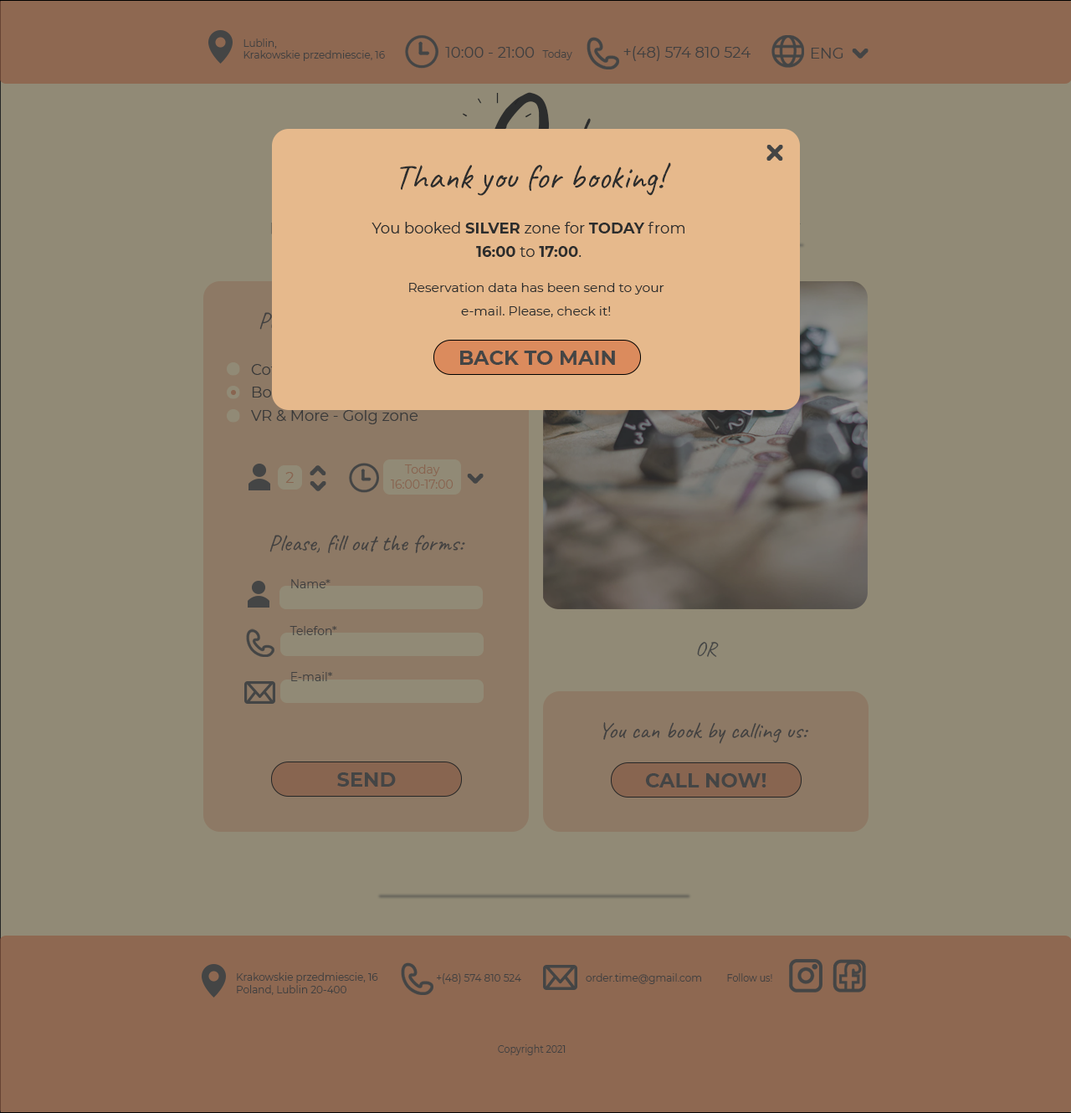
<style>
.page{position:relative;width:1071px;height:1113px;background:#918a76}
.page>*{position:absolute;margin:0}
.t1{font:10px "Montserrat-Regular";color:#3e3b3b}
.t2{font:15.1px "Montserrat-Regular";color:#3e3b3b}
.t3{font:133.9px "Caveat-Regular"}
.t4{font:35.2px "Caveat-Regular";color:#2c2d2d}
.t5{font:15.1px/23.4px "Montserrat-Regular";color:#2c2d2d}
.t6{font:15.1px/23.4px "Montserrat-Bold";color:#2c2d2d;text-transform:uppercase}
.t7{font:15.1px/23.4px "Montserrat-Bold";color:#2c2d2d}
.t8{font:11.7px/23.4px "Montserrat-Regular";color:#2c2d2d;scale:1.11 1}
.t9{font:20.1px "Montserrat-Bold";color:#444545}
.t10{font:15.1px "Montserrat-Regular";color:#2b2b2b}
.t11{font:15.1px "Montserrat-Regular";color:#886550}
.t12{font:11.7px "Montserrat-Regular";color:#886550}
.t13{font:23.4px "Caveat-Regular";color:#3e3b3b}
.t14{font:11.7px "Montserrat-Regular";color:#3e3b3b}
.t15{font:20.1px "Caveat-Regular";color:#444545}
.t16{font:10px "Montserrat-Regular";color:#3e3b3b;scale:0.92 1}
</style>
<div class="page">
<p class="t1" style="left:244px;top:38px;width:141px;height:23px;text-align:justify">Lublin,<br>Krakowskie przedmiescie, 16</p>
<p class="t2" style="left:445px;top:47px;width:127px;height:13px">10:00 - 21:00  <span class="t1">Today</span></p>
<p class="t2" style="left:624px;top:46px;width:127px;height:15px">+(48) 574 810 524</p>
<p class="t2" style="left:811px;top:48px;width:33px;height:11px">ENG</p>
<p class="t3" style="left:485px;top:92px;width:65px;height:95px">O</p>
<p class="t4" style="left:400px;top:162px;width:271px;height:34px">Thank you for booking!</p>
<p class="t5" style="left:372px;top:222px;width:313px;height:35px;text-align:center">You booked <span class="t6">silver</span> zone for <span class="t6">today</span> from <span class="t7">16:00</span> to <span class="t7">17:00</span>.</p>
<p class="t8" style="left:409px;top:283px;width:256px;height:34px;text-align:center">Reservation data has been send to your e-mail. Please, check it!</p>
<p class="t9" style="left:460px;top:351px;width:155px;height:14px">BACK TO MAIN</p>
<p class="t10" style="left:251px;top:409px;width:167px;height:15px">VR &amp; More - Golg zone</p>
<p class="t11" style="left:285px;top:472px;width:9px;height:11px">2</p>
<p class="t12" style="left:404px;top:464px;width:36px;height:12px">Today</p>
<p class="t12" style="left:391px;top:480px;width:63px;height:9px">16:00-17:00</p>
<p class="t13" style="left:269px;top:535px;width:196px;height:18px">Please, fill out the forms:</p>
<p class="t14" style="left:291px;top:579px;width:40px;height:9px">Name*</p>
<p class="t14" style="left:290px;top:626px;width:47px;height:9px">Telefon*</p>
<p class="t15" style="left:697px;top:642px;width:22px;height:15px">OR</p>
<p class="t14" style="left:291px;top:672px;width:41px;height:9px">E-mail*</p>
<p class="t13" style="left:603px;top:722px;width:206px;height:22px">You can book by calling us:</p>
<p class="t9" style="left:337px;top:772px;width:59px;height:15px">SEND</p>
<p class="t9" style="left:645px;top:773px;width:122px;height:15px">CALL NOW!</p>
<p class="t1" style="left:237px;top:973px;width:141px;height:22px;text-align:justify">Krakowskie przedmiescie, 16<br>Poland, Lublin 20-400</p>
<p class="t1" style="left:437px;top:973px;width:84px;height:11px">+(48) 574 810 524</p>
<p class="t1" style="left:586px;top:973px;width:115px;height:11px">order.time@gmail.com</p>
<p class="t16" style="left:727px;top:973px;width:45px;height:9px">Follow us!</p>
<p class="t16" style="left:498px;top:1044px;width:68px;height:11px">Copyright 2021</p>
</div>
